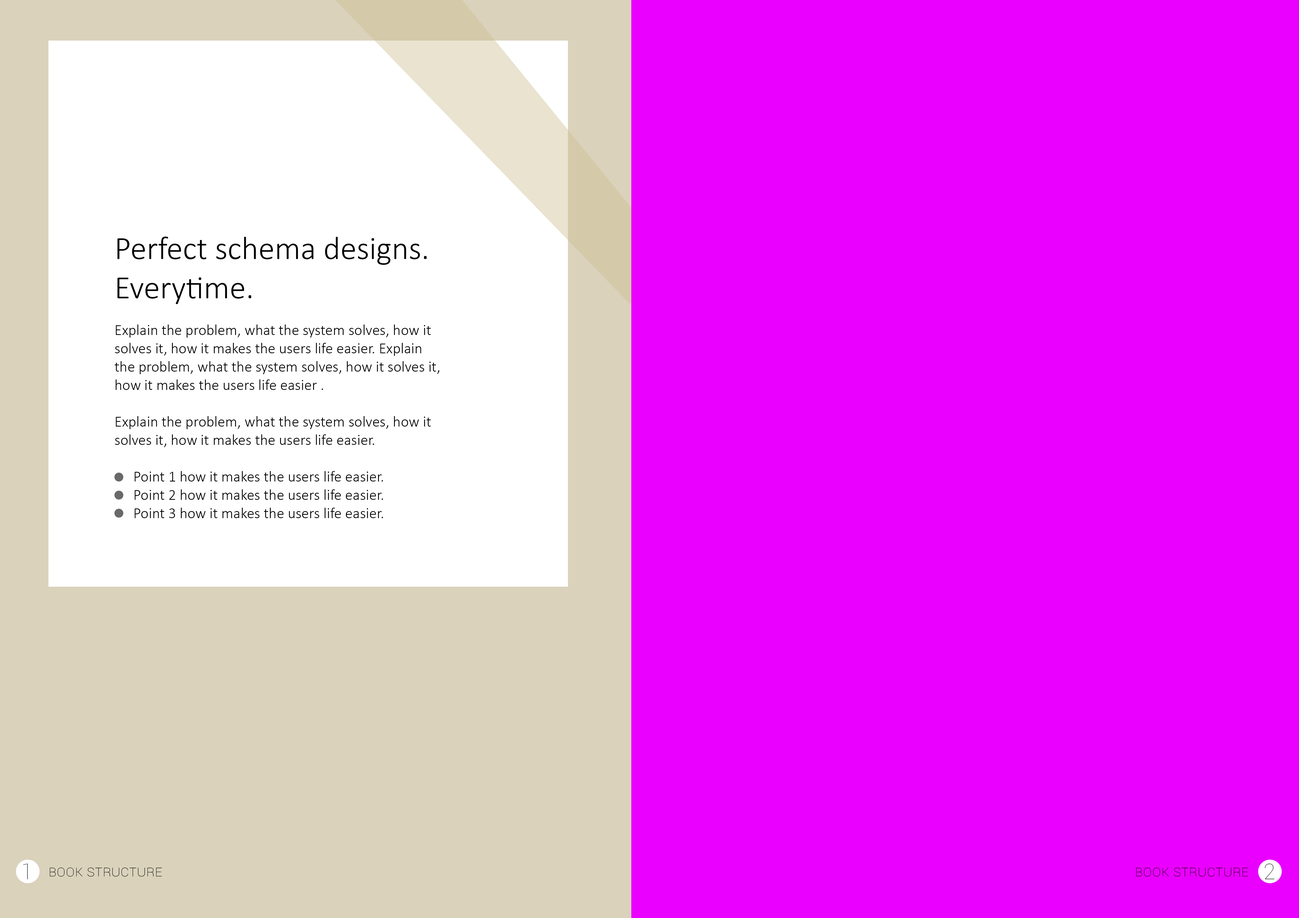
<style>
.page{position:relative;width:1299px;height:918px;background:#ea00ff}
.page>*{position:absolute;margin:0}
.t1{font:15.3px "Calibri-Light";color:#000000}
.t2{font:32.7px "Calibri-Light";color:#000000}
.t3{font:21.8px "Roboto-Thin";color:#484848}
.t4{font:15.3px "Roboto-Thin";color:#000000;font-variant:small-caps}
</style>
<div class="page">
<p class="t1" style="left:115px;top:237px;width:324px;height:281px"><span class="t2">Perfect schema designs. Everytime.<br></span><br>Explain the problem, what the system solves, how it solves it, how it makes the users life easier. Explain the problem, what the system solves, how it solves it, how it makes the users life easier .<br><br>Explain the problem, what the system solves, how it solves it, how it makes the users life easier.<br><br>  Point 1 how it makes the users life easier.<br>  Point 2 how it makes the users life easier.<br>  Point 3 how it makes the users life easier.</p>
<p class="t3" style="left:23px;top:864px;width:5px;height:16px">1</p>
<p class="t4" style="left:50px;top:868px;width:112px;height:9px">Book structure</p>
<p class="t4" style="left:1136px;top:868px;width:112px;height:9px">Book structure</p>
<p class="t3" style="left:1264px;top:864px;width:10px;height:16px">2</p>
</div>
